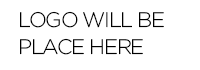
<style>
.page{position:relative;width:200px;height:70px;background:#ffffff}
.page>*{position:absolute;margin:0}
.t1{font:21px/27px "Gotham-Light";letter-spacing:-0.06em;color:#000000}
</style>
<div class="page">
<p class="t1" style="left:20px;top:11px;width:144px;height:44px;text-align:right">LOGO WILL BE <br>PLACE HERE</p>
</div>
